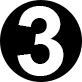
<style>
.page{position:relative;width:82px;height:82px;background:#000000}
.page>*{position:absolute;margin:0}
.t1{font:95.8px "Arial-BoldMT";color:#ffffff}
</style>
<div class="page">
<p class="t1" style="left:17px;top:6px;width:47px;height:70px">3</p>
</div>
